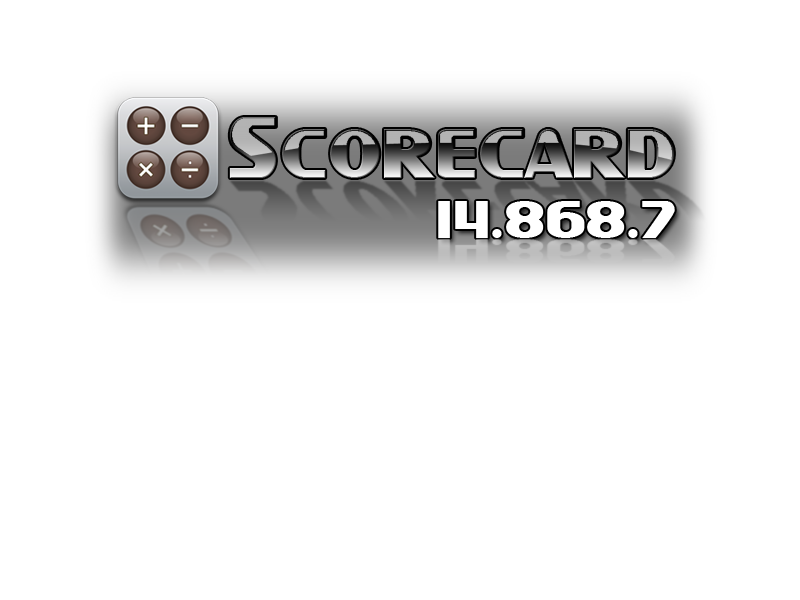
<style>
.page{position:relative;width:800px;height:600px;background:#ffffff}
.page>*{position:absolute;margin:0}
.t1{font:92.1px "SFIntellivised";letter-spacing:0.01em;color:#000000}
.t2{font:55.6px "SFIntellivised";letter-spacing:0.01em;color:#ffffff}
</style>
<div class="page">
<p class="t1" style="left:229px;top:117px;width:445px;height:61px">Scorecard</p>
<p class="t2" style="left:438px;top:201px;width:237px;height:37px">14.868.7</p>
</div>
